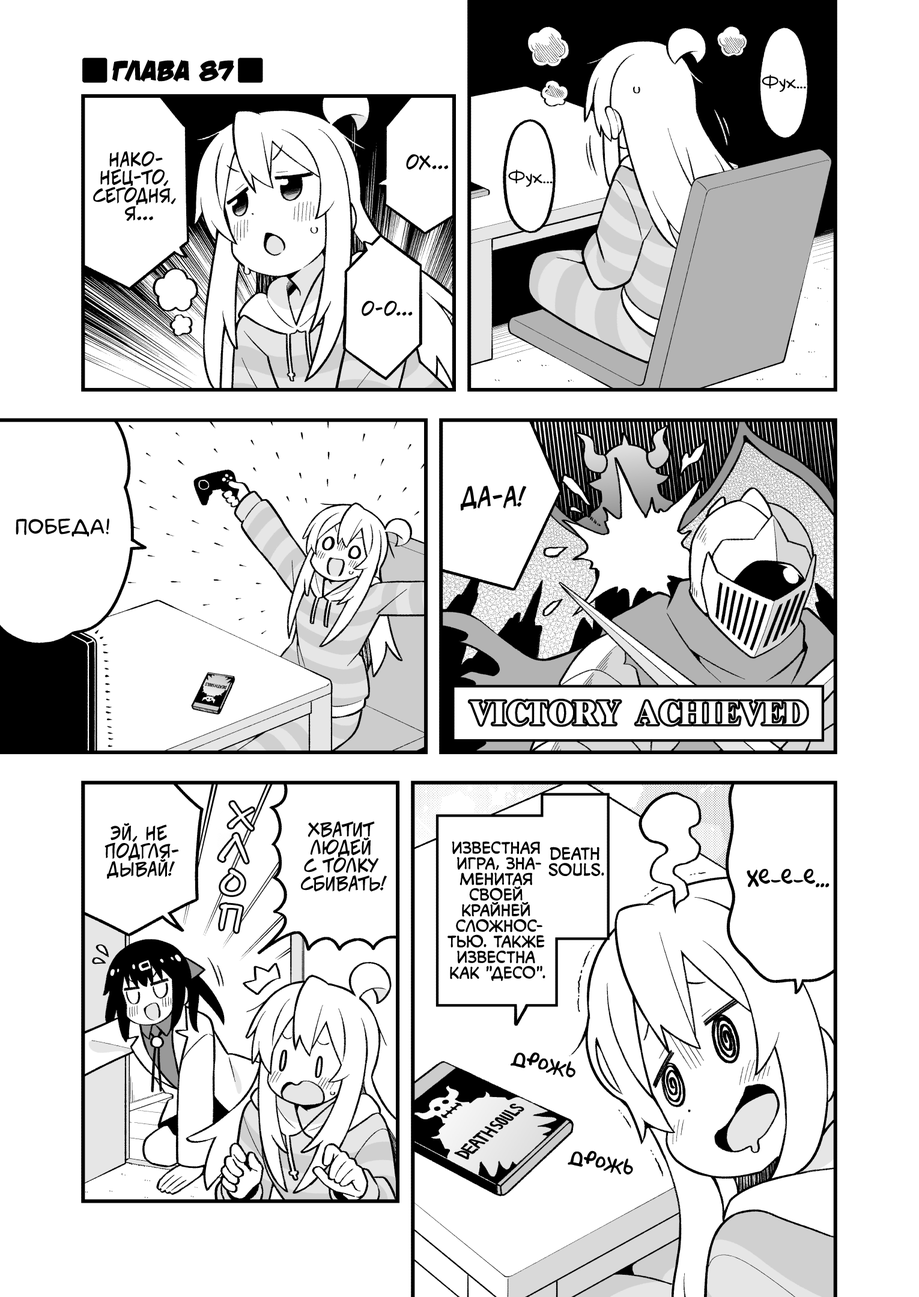
<style>
.page{position:relative;width:919px;height:1297px;background:#ffffff}
.page>*{position:absolute;margin:0}
.t1{font:28.8px "v_DamnNoisyKids";color:#000000;text-transform:uppercase}
.t2{font:18px "v_Augie";color:#000000}
.t3{font:18px "v_CCJeffCampbell";color:#000000;text-transform:uppercase}
.t4{font:25.2px "v_CCJeffCampbell";color:#000000;text-transform:uppercase}
.t5{font:21.6px "laCartoonerie";color:#000000;text-transform:uppercase}
.t6{font:36px "DSNote";color:#ffffff}
.t7{font:15.6px "v_CCMonologous";color:#000000;text-transform:uppercase}
.t8{font:16.2px "v_CCMonologous";color:#000000;text-transform:uppercase}
.t9{font:21.6px "AkbarPlain";color:#000000}
</style>
<div class="page">
<p class="t1" style="left:112px;top:59px;width:122px;height:23px">Глава 87</p>
<p class="t2" style="left:762px;top:74px;width:44px;height:18px">Фух...</p>
<p class="t3" style="left:93px;top:151px;width:83px;height:70px;text-align:center">Нако-<br>нец-то,<br>сегодня,<br>я...</p>
<p class="t3" style="left:406px;top:154px;width:42px;height:17px">Ох...</p>
<p class="t2" style="left:508px;top:169px;width:45px;height:18px">Фух...</p>
<p class="t3" style="left:362px;top:301px;width:51px;height:16px">О-о...</p>
<p class="t4" style="left:460px;top:486px;width:67px;height:25px">Да-а!</p>
<p class="t5" style="left:16px;top:518px;width:93px;height:19px">Победа!</p>
<p class="t6" style="left:229px;top:803px;width:24px;height:27px;rotate:7deg">х</p>
<p class="t3" style="left:301px;top:822px;width:86px;height:70px;text-align:center">Хватит<br>людей<br>с толку<br>сбивать!</p>
<p class="t3" style="left:105px;top:823px;width:74px;height:56px;text-align:center">Эй, не<br>подгля-<br>дывай!</p>
<p class="t6" style="left:219px;top:834px;width:28px;height:29px;rotate:9deg">л</p>
<p class="t7" style="left:448px;top:842px;width:97px;height:140px;text-align:center">Известная<br>игра, зна-<br>менитая<br>своей<br>крайней<br>сложнос-<br>тью. Также<br>известна<br>как "Десо".</p>
<p class="t8" style="left:548px;top:847px;width:56px;height:29px;text-align:center">Death<br>Souls.</p>
<p class="t6" style="left:221px;top:870px;width:23px;height:25px">о</p>
<p class="t9" style="left:747px;top:869px;width:83px;height:19px">Хе-е-е...</p>
<p class="t6" style="left:220px;top:905px;width:22px;height:27px;rotate:9deg">п</p>
<p class="t9" style="left:511px;top:1052px;width:64px;height:26px;rotate:12deg">дрожь</p>
<p class="t9" style="left:568px;top:1151px;width:65px;height:24px;rotate:10deg">дрожь</p>
</div>
